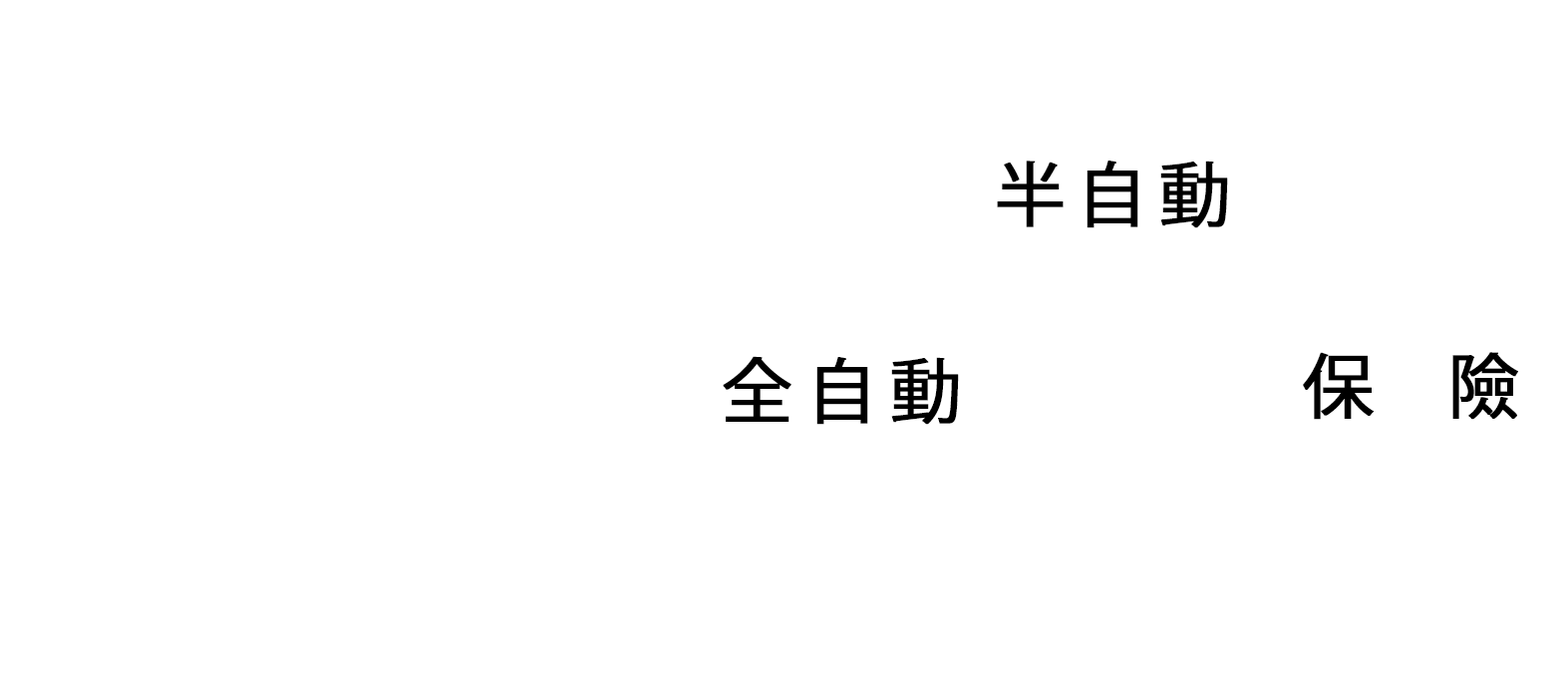
<style>
.page{position:relative;width:1568px;height:699px;background:#ffffff}
.page>*{position:absolute;margin:0}
.t1{font:70.6px "KozGoPr6N-Regular";color:#000000;text-transform:uppercase;font-weight:bold}
.t2{font:70.6px "KozGoPr6N-Regular";letter-spacing:0.2em;color:#000000;text-transform:uppercase;font-weight:bold}
</style>
<div class="page">
<p class="t1" style="left:997px;top:160px;width:231px;height:68px">半自動</p>
<p class="t1" style="left:1303px;top:352px;width:215px;height:68px">保險</p>
<p class="t2" style="left:723px;top:356px;width:236px;height:69px">全自動</p>
</div>
